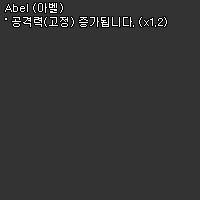
<style>
.page{position:relative;width:200px;height:200px;background:#333333}
.page>*{position:absolute;margin:0}
.t1{font:11px/14px "Dotum";color:#ffffff}
</style>
<div class="page">
<p class="t1" style="left:5px;top:3px;width:162px;height:24px">Abel (아벨)<br>˚ 공격력(고정) 증가됩니다. (x1.2)</p>
</div>
